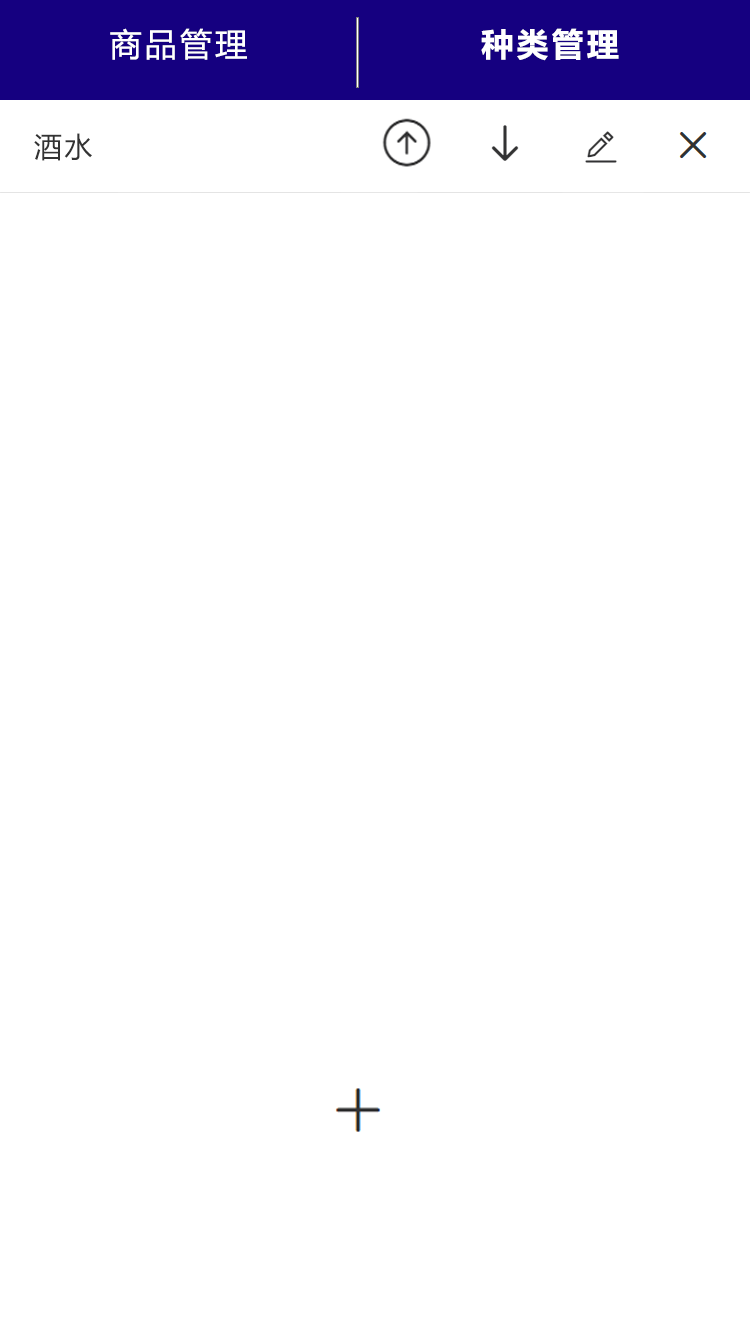
<style>
.page{position:relative;width:750px;height:1334px;background:#ffffff}
.page>*{position:absolute;margin:0}
.t1{font:32px "MicrosoftYaHei-Bold";letter-spacing:0.1em;color:#ffffff}
.t2{font:28px "MicrosoftYaHei";letter-spacing:0.1em;color:#333333}
</style>
<div class="page">
<p class="t1" style="left:481px;top:28px;width:138px;height:33px">种类管理</p>
<p class="t2" style="left:34px;top:133px;width:58px;height:28px">酒水</p>
</div>
